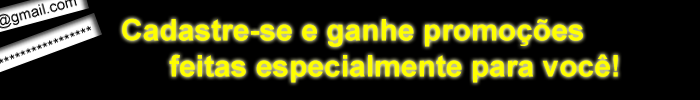
<style>
.page{position:relative;width:700px;height:100px;background:#000000}
.page>*{position:absolute;margin:0}
.t1{font:30px "Arial-BoldMT";color:#ffff00}
</style>
<div class="page">
<p class="t1" style="left:122px;top:18px;width:461px;height:29px">Cadastre-se e ganhe promoções</p>
<p class="t1" style="left:169px;top:54px;width:449px;height:29px">feitas especialmente para você!</p>
</div>
